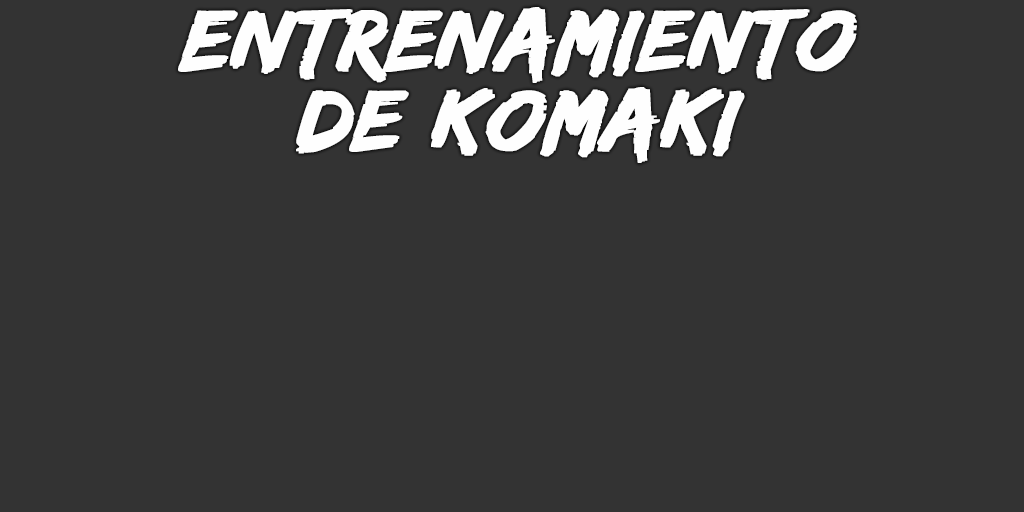
<style>
.page{position:relative;width:1024px;height:512px;background:#333333}
.page>*{position:absolute;margin:0}
.t1{font:90px/80px "EdoSZ";color:#fefefe;font-weight:bold;font-style:italic;scale:1.04 1}
</style>
<div class="page">
<p class="t1" style="left:178px;top:7px;width:679px;height:156px;text-align:center">entrenamiento<br>de komaki</p>
</div>
